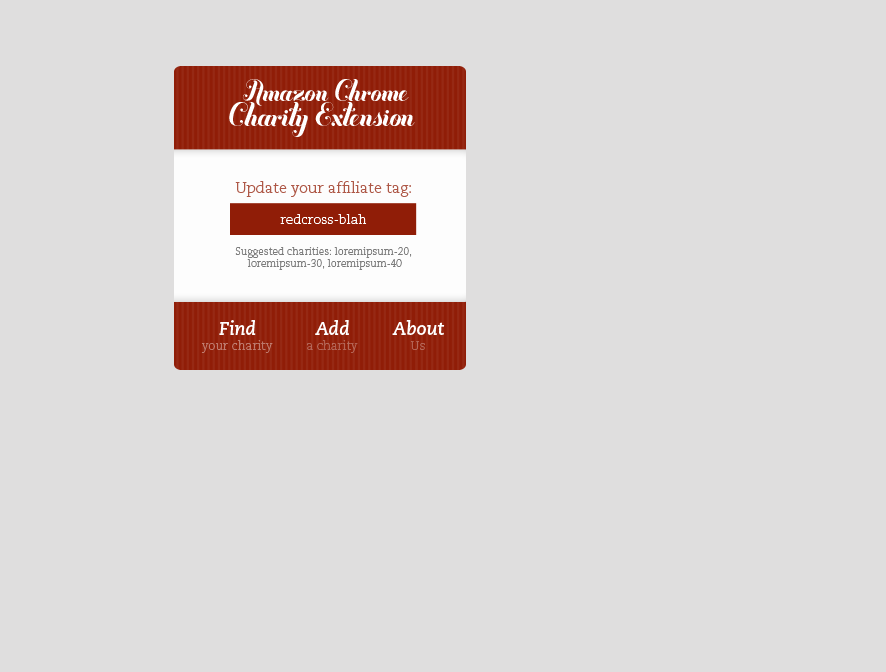
<style>
.page{position:relative;width:886px;height:672px;background:#dfdede}
.page>*{position:absolute;margin:0}
.t1{font:31.2px "Buttermilk";color:#ffffff}
.t2{font:33.9px "Buttermilk";color:#fefefe}
.t3{font:14.8px "CaeciliaLTStd-Light";color:#ae5847}
.t4{font:13.1px "CaeciliaLTStd-Light";color:#ffffff}
.t5{font:10.1px "CaeciliaLTStd-Light";color:#7d7d7d}
.t6{font:18.5px "CaeciliaLTStd-BoldItalic";color:#ffffff}
.t7{font:12px "CaeciliaLTStd-Light";color:#be7a6e}
.t8{font:12px "CaeciliaLTStd-Light";color:#b36355}
.t9{font:12px "CaeciliaLTStd-Light";color:#b46556}
</style>
<div class="page">
<p class="t1" style="left:242px;top:79px;width:167px;height:27px">Amazon Chrome</p>
<p class="t2" style="left:229px;top:102px;width:186px;height:35px">Charity Extension</p>
<p class="t3" style="left:235px;top:181px;width:176px;height:16px">Update your affiliate tag:</p>
<p class="t4" style="left:280px;top:214px;width:87px;height:10px">redcross-blah</p>
<p class="t5" style="left:235px;top:247px;width:177px;height:23px;text-align:center">Suggested charities: loremipsum-20, <br>loremipsum-30, loremipsum-40</p>
<p class="t6" style="left:219px;top:320px;width:37px;height:15px">Find</p>
<p class="t6" style="left:315px;top:320px;width:34px;height:15px">Add</p>
<p class="t6" style="left:392px;top:320px;width:53px;height:15px">About</p>
<p class="t7" style="left:201px;top:340px;width:72px;height:13px">your charity</p>
<p class="t8" style="left:307px;top:340px;width:51px;height:13px">a charity</p>
<p class="t9" style="left:410px;top:341px;width:15px;height:9px">Us</p>
</div>
